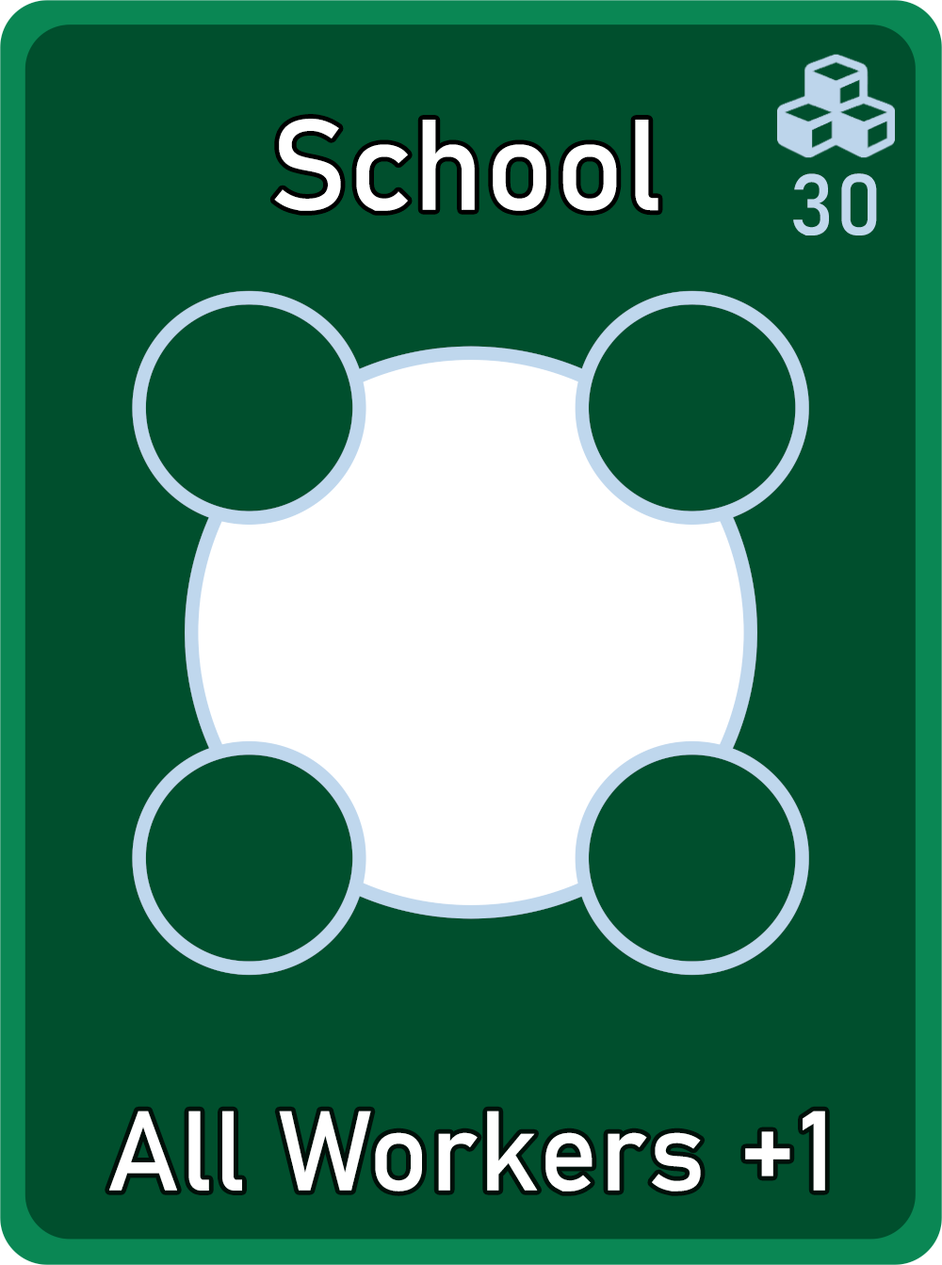
<style>
.page{position:relative;width:942px;height:1265px;background:#004f2d}
.page>*{position:absolute;margin:0}
.t1{font:126.7px "Bahnschrift";letter-spacing:0.01em;color:#ffffff}
.t2{font:85px "Bahnschrift";letter-spacing:0.01em;color:#c1d8ed}
.t3{font:111.3px "Bahnschrift";letter-spacing:0.01em;color:#ffffff}
</style>
<div class="page">
<p class="t1" style="left:274px;top:119px;width:385px;height:92px">School</p>
<p class="t2" style="left:793px;top:173px;width:84px;height:63px">30</p>
<p class="t3" style="left:109px;top:1111px;width:716px;height:81px">All Workers +1</p>
</div>
